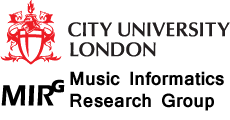
<style>
.page{position:relative;width:230px;height:120px;background:#ffffff}
.page>*{position:absolute;margin:0}
.t1{font:18px "Mangal-Bold";color:#000000}
.t2{font:30px "ErasITC-Demi";color:#000000}
.t3{font:18px "ErasITC-Bold";color:#000000}
</style>
<div class="page">
<p class="t1" style="left:70px;top:71px;width:154px;height:40px">Music Informatics<br>Research Group</p>
<p class="t2" style="left:1px;top:85px;width:53px;height:21px">MIR</p>
<p class="t3" style="left:51px;top:79px;width:14px;height:14px">G</p>
</div>
